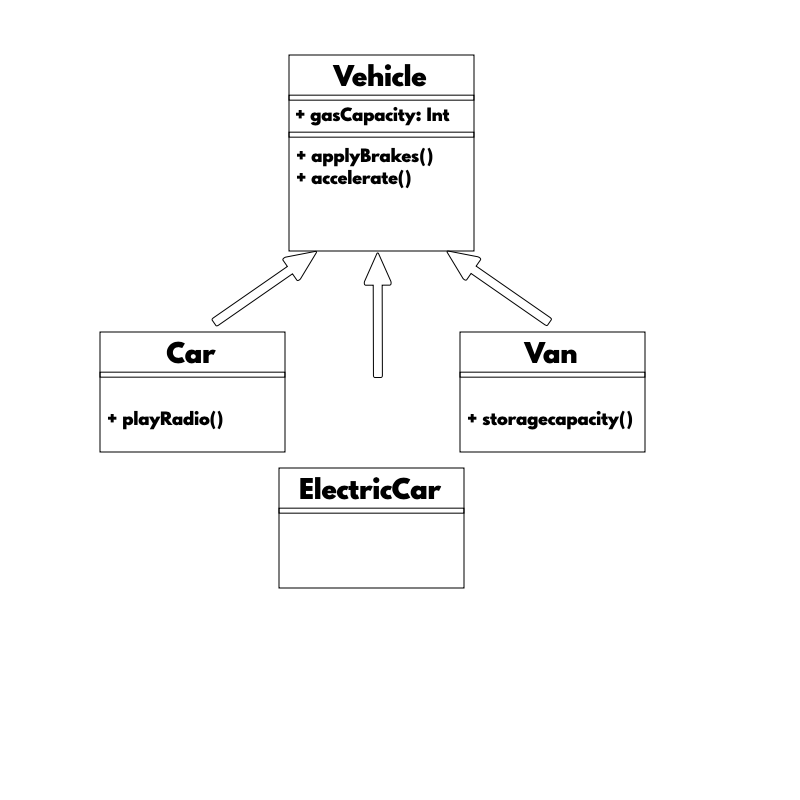
<style>
.page{position:relative;width:800px;height:800px;background:#ffffff}
.page>*{position:absolute;margin:0}
.t1{font:28px "SpartanMB-Black";color:#000000}
.t2{font:18px "SpartanMB-Black";color:#000000}
</style>
<div class="page">
<p class="t1" style="left:332px;top:64px;width:95px;height:23px">Vehicle</p>
<p class="t2" style="left:295px;top:106px;width:155px;height:20px">+ gasCapacity: Int</p>
<p class="t2" style="left:296px;top:147px;width:137px;height:42px">+ applyBrakes()<br>+ accelerate()</p>
<p class="t1" style="left:166px;top:341px;width:50px;height:23px">Car</p>
<p class="t1" style="left:523px;top:342px;width:54px;height:22px">Van</p>
<p class="t2" style="left:107px;top:410px;width:116px;height:20px">+ playRadio()</p>
<p class="t2" style="left:467px;top:410px;width:166px;height:20px">+ storagecapacity()</p>
<p class="t1" style="left:300px;top:477px;width:142px;height:23px">ElectricCar</p>
</div>
